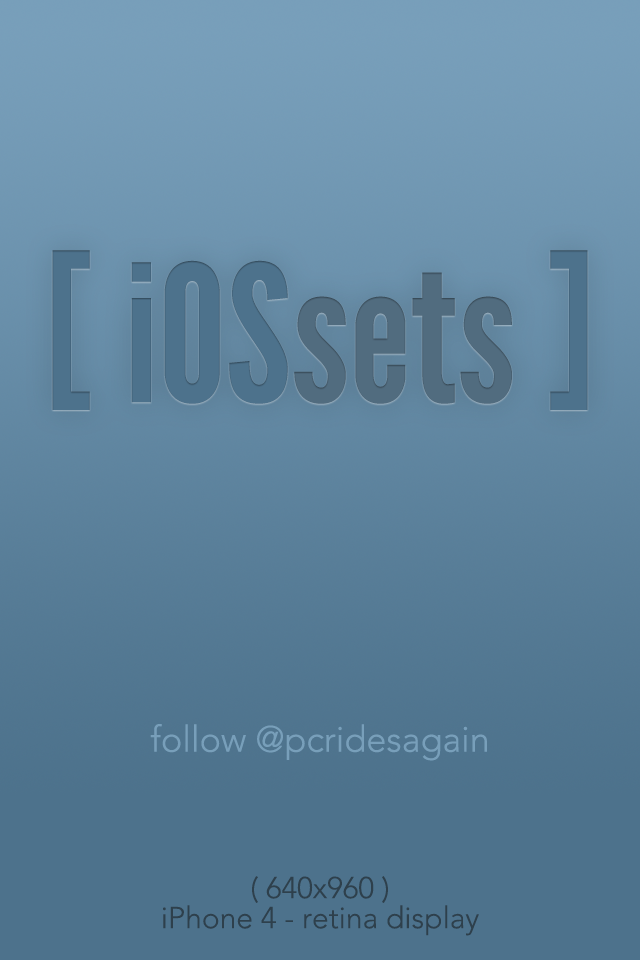
<style>
.page{position:relative;width:640px;height:960px;background:#4d728c}
.page>*{position:absolute;margin:0}
.t1{font:190px "LeagueGothic";color:#4d728c}
.t2{font:190px "LeagueGothic";color:#516c7f}
.t3{font:36px "Avenir-Light";color:#789fba}
.t4{font:30px/30px "Avenir-Light";color:#2e404c}
</style>
<div class="page">
<p class="t1" style="left:52px;top:250px;width:536px;height:160px">[ iOS<span class="t2">sets </span>]</p>
<p class="t3" style="left:150px;top:724px;width:337px;height:37px">follow @pcridesagain</p>
<p class="t4" style="left:163px;top:876px;width:316px;height:60px;text-align:center">( 640x960 )<br>iPhone 4 - retina display</p>
</div>
